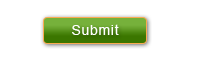
<style>
.page{position:relative;width:200px;height:59px;background:#ffffff}
.page>*{position:absolute;margin:0}
.t1{font:14px "ArialMT";letter-spacing:0.05em;color:#ffffff}
</style>
<div class="page">
<p class="t1" style="left:72px;top:24px;width:47px;height:11px">Submit</p>
</div>
